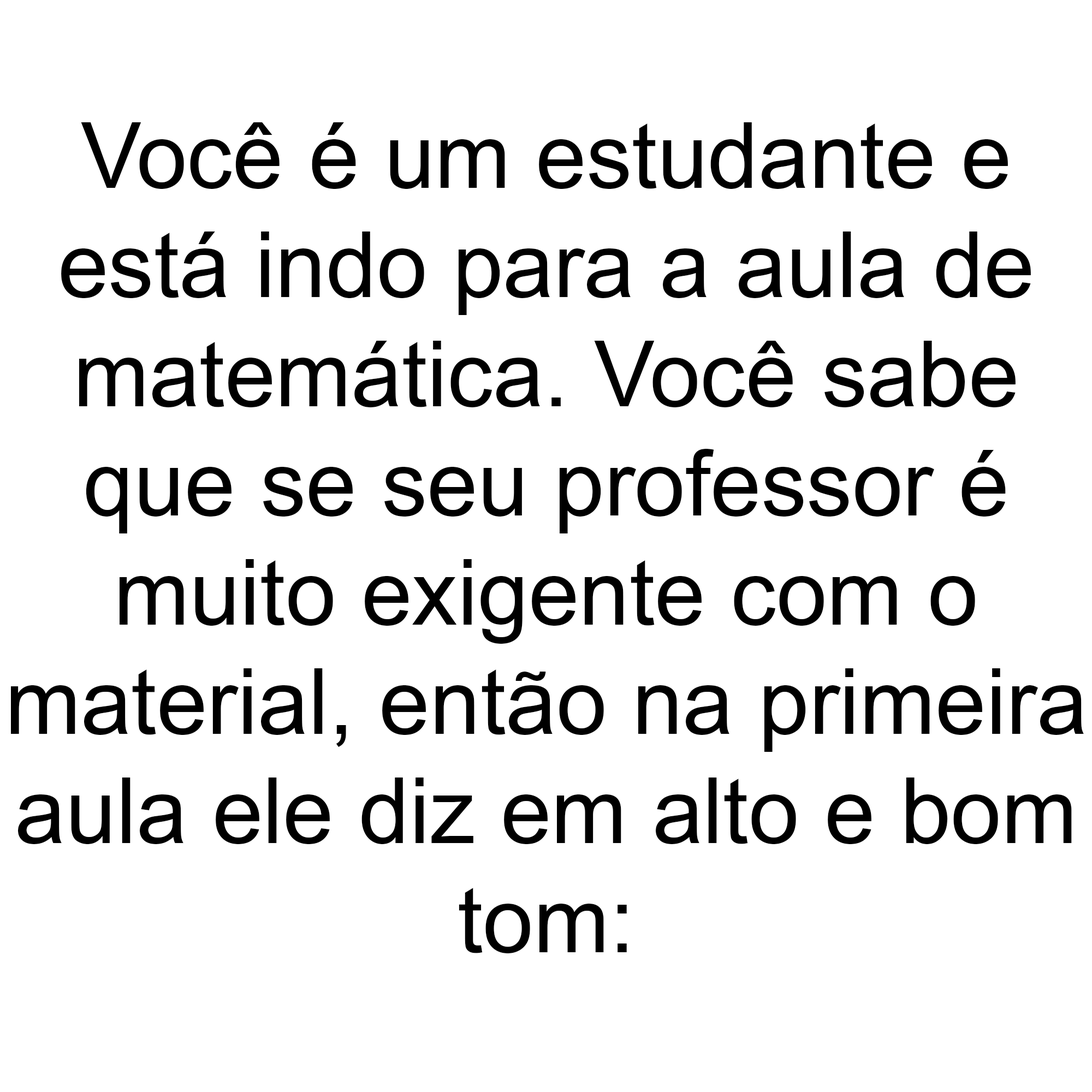
<style>
.page{position:relative;width:1092px;height:1092px;background:#ffffff}
.page>*{position:absolute;margin:0}
.t1{font:91px "ArialMT";color:#000000}
</style>
<div class="page">
<p class="t1" style="left:11px;top:122px;width:1073px;height:831px;text-align:center">Você é um estudante e<br>está indo para a aula de<br>matemática. Você sabe<br>que se seu professor é<br>muito exigente com o<br>material, então na primeira<br>aula ele diz em alto e bom<br>tom:</p>
</div>
